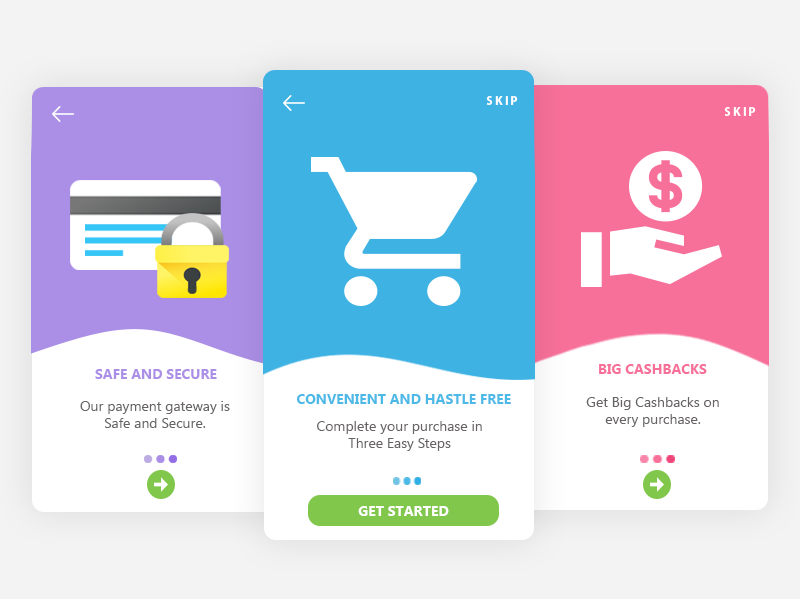
<style>
.page{position:relative;width:800px;height:600px;background:#ffffff}
.page>*{position:absolute;margin:0}
.t1{font:12px "MyriadPro-Bold";color:#ffffff}
.t2{font:14px "MyanmarText-Bold";color:#f77099}
.t3{font:14px "MyanmarText-Bold";color:#ab8fe6}
.t4{font:14px "SegoeUI";color:#686464}
.t5{font:14px "MyanmarText-Bold";color:#4db9e7}
.t6{font:14px "MyanmarText-Bold";color:#ffffff}
</style>
<div class="page">
<p class="t1" style="left:486px;top:96px;width:32px;height:9px">S K I P</p>
<p class="t1" style="left:724px;top:107px;width:32px;height:9px">S K I P</p>
<p class="t2" style="left:599px;top:364px;width:108px;height:10px">BIG CASHBACKS</p>
<p class="t3" style="left:95px;top:369px;width:122px;height:10px">SAFE AND SECURE</p>
<p class="t4" style="left:80px;top:401px;width:150px;height:27px;text-align:center">Our payment gateway is Safe and Secure.</p>
<p class="t5" style="left:296px;top:394px;width:215px;height:10px">CONVENIENT AND HASTLE FREE</p>
<p class="t4" style="left:586px;top:397px;width:133px;height:30px;text-align:center">Get Big Cashbacks on <br>every purchase.</p>
<p class="t4" style="left:317px;top:421px;width:165px;height:30px;text-align:center">Complete your purchase in Three Easy Steps</p>
<p class="t6" style="left:358px;top:506px;width:91px;height:10px">GET STARTED</p>
</div>
